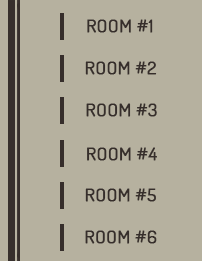
<style>
.page{position:relative;width:202px;height:261px;background:#b6b19f}
.page>*{position:absolute;margin:0}
.t1{font:16.5px "Dosis-Book";color:#362e2b;font-weight:bold;scale:1.17 1}
</style>
<div class="page">
<p class="t1" style="left:87px;top:19px;width:66px;height:14px">ROOM #1</p>
<p class="t1" style="left:85px;top:61px;width:72px;height:14px">ROOM #2</p>
<p class="t1" style="left:86px;top:103px;width:71px;height:14px">ROOM #3</p>
<p class="t1" style="left:87px;top:147px;width:70px;height:14px">ROOM #4</p>
<p class="t1" style="left:85px;top:188px;width:71px;height:14px">ROOM #5</p>
<p class="t1" style="left:85px;top:230px;width:72px;height:14px">ROOM #6</p>
</div>
